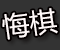
<style>
.page{position:relative;width:60px;height:50px;background:#333333}
.page>*{position:absolute;margin:0}
.t1{font:26.8px "MicrosoftYaHei";color:#fff9f9}
</style>
<div class="page">
<p class="t1" style="left:2px;top:8px;width:56px;height:32px;rotate:-7deg">悔棋</p>
</div>
